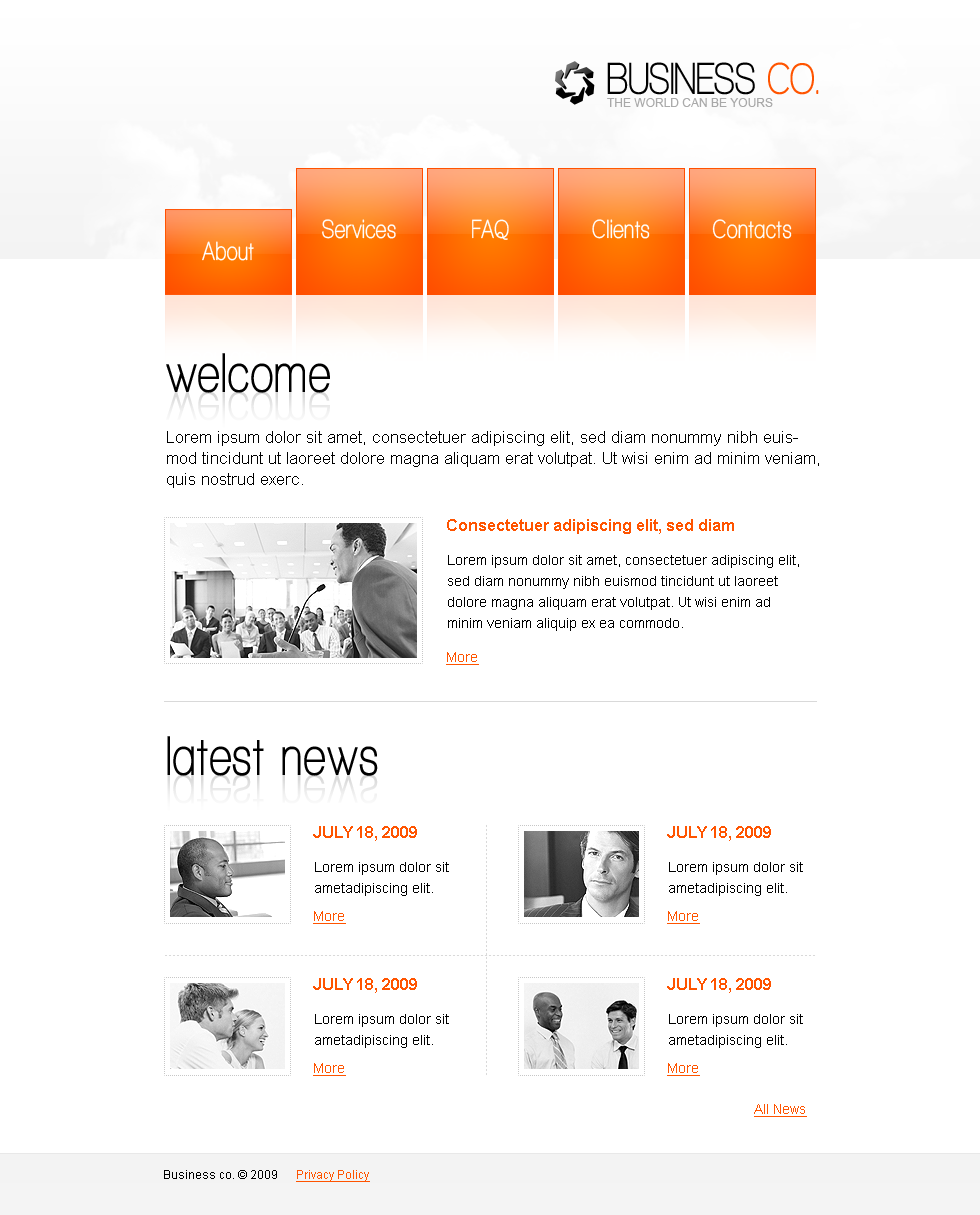
<style>
.page{position:relative;width:980px;height:1215px;background:#ffffff}
.page>*{position:absolute;margin:0}
.t1{font:46px "WalkwayCondensedBold";color:#000000}
.t2{font:46px "WalkwayCondensedBold";color:#ff5400}
.t3{font:12px "ArialMT";color:#a8a8a8;text-transform:uppercase}
.t4{font:27px "WalkwayCondensedBold";letter-spacing:0.03em;color:#ffffff}
.t5{font:57px "WalkwayCondensedBold";letter-spacing:0.03em;color:#000000}
.t6{font:57px "WalkwayCondensedBold";letter-spacing:0.03em;color:#eaeaea}
.t7{font:17px/21px "ArialMT";color:#000000}
.t8{font:16px "Arial-BoldMT";color:#ff5400}
.t9{font:14px/21px "ArialMT";color:#000000}
.t10{font:14px "ArialMT";color:#ff5400;text-decoration:underline}
.t11{font:12px "ArialMT";color:#000000}
.t12{font:12px "ArialMT";color:#ff5400;text-decoration:underline}
</style>
<div class="page">
<p class="t1" style="left:607px;top:62px;width:212px;height:33px">BUSINESS <span class="t2">CO.</span></p>
<p class="t3" style="left:607px;top:98px;width:166px;height:9px">The world can be yours</p>
<p class="t4" style="left:322px;top:219px;width:74px;height:20px">Services</p>
<p class="t4" style="left:472px;top:219px;width:37px;height:21px">FAQ</p>
<p class="t4" style="left:592px;top:219px;width:58px;height:20px">Clients</p>
<p class="t4" style="left:712px;top:219px;width:80px;height:20px">Contacts</p>
<p class="t4" style="left:202px;top:241px;width:52px;height:20px">About</p>
<p class="t5" style="left:166px;top:353px;width:164px;height:40px">welcome</p>
<p class="t6" style="left:166px;top:391px;width:164px;height:40px">welcome</p>
<p class="t7" style="left:167px;top:431px;width:652px;height:57px">Lorem ipsum dolor sit amet, consectetuer adipiscing elit, sed diam nonummy nibh euismod tincidunt ut laoreet dolore magna aliquam erat volutpat. Ut wisi enim ad minim veniam, quis nostrud exerc.</p>
<p class="t8" style="left:447px;top:519px;width:287px;height:15px">Consectetuer adipiscing elit, sed diam</p>
<p class="t9" style="left:448px;top:555px;width:351px;height:76px">Lorem ipsum dolor sit amet, consectetuer adipiscing elit, sed diam nonummy nibh euismod tincidunt ut laoreet dolore magna aliquam erat volutpat. Ut wisi enim ad minim veniam aliquip ex ea commodo.</p>
<p class="t10" style="left:446px;top:652px;width:33px;height:13px">More</p>
<p class="t5" style="left:167px;top:736px;width:211px;height:40px">latest news</p>
<p class="t6" style="left:167px;top:774px;width:211px;height:40px">latest news</p>
<p class="t8" style="left:313px;top:826px;width:104px;height:15px">JULY 18, 2009</p>
<p class="t8" style="left:667px;top:826px;width:104px;height:15px">JULY 18, 2009</p>
<p class="t9" style="left:315px;top:862px;width:134px;height:34px">Lorem ipsum dolor sit ametadipiscing elit.</p>
<p class="t9" style="left:669px;top:862px;width:134px;height:34px">Lorem ipsum dolor sit ametadipiscing elit.</p>
<p class="t10" style="left:313px;top:911px;width:33px;height:13px">More</p>
<p class="t10" style="left:667px;top:911px;width:33px;height:13px">More</p>
<p class="t8" style="left:313px;top:978px;width:104px;height:15px">JULY 18, 2009</p>
<p class="t8" style="left:667px;top:978px;width:104px;height:15px">JULY 18, 2009</p>
<p class="t9" style="left:315px;top:1014px;width:134px;height:34px">Lorem ipsum dolor sit ametadipiscing elit.</p>
<p class="t9" style="left:669px;top:1014px;width:134px;height:34px">Lorem ipsum dolor sit ametadipiscing elit.</p>
<p class="t10" style="left:313px;top:1063px;width:33px;height:13px">More</p>
<p class="t10" style="left:667px;top:1063px;width:33px;height:13px">More</p>
<p class="t10" style="left:754px;top:1104px;width:53px;height:13px">All News</p>
<p class="t11" style="left:164px;top:1170px;width:206px;height:12px">Business co. © 2009      <span class="t12">Privacy Policy</span></p>
</div>
